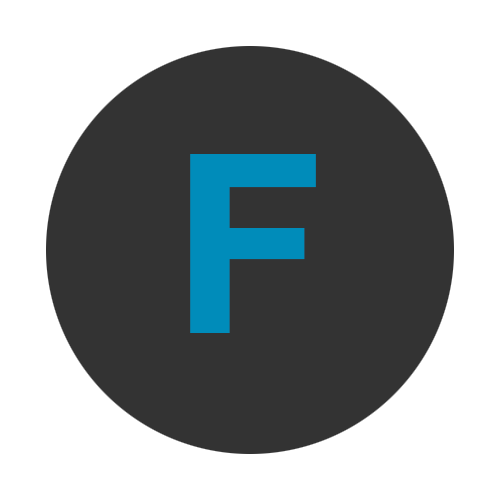
<style>
.page{position:relative;width:500px;height:500px;background:#ffffff}
.page>*{position:absolute;margin:0}
.t1{font:250px "HelveticaNeue-Bold";color:#008cba}
</style>
<div class="page">
<p class="t1" style="left:190px;top:154px;width:126px;height:179px">F</p>
</div>
